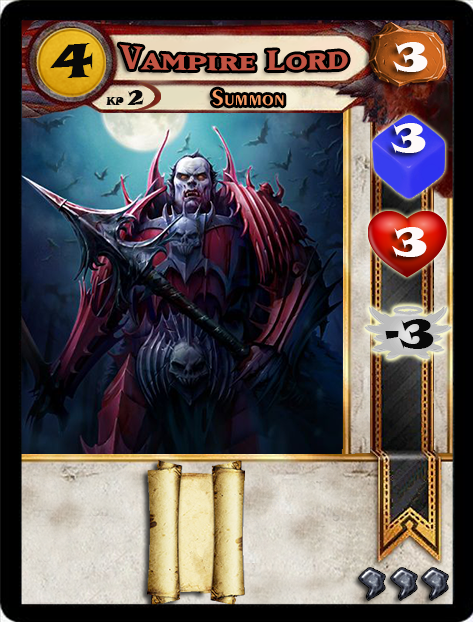
<style>
.page{position:relative;width:473px;height:622px}
.page>*{position:absolute;margin:0}
.t1{font:46.6px "SnapITC-Regular";color:#090909;scale:1.05 1}
.t2{font:40px "SnapITC-Regular";color:#fef9f9;scale:1.05 1}
.t3{font:22.7px "Exotic350BT-DemiBold";color:#f89c64;scale:1.06 1}
.t4{font:20.5px "SnapITC-Regular";color:#090909}
.t5{font:40px "SnapITC-Regular";color:#090909;scale:1.05 1}
</style>
<div class="page">
<p class="t1" style="left:50px;top:43px;width:43px;height:35px">4</p>
<p class="t2" style="left:393px;top:42px;width:35px;height:30px">3</p>
<p class="t3" style="left:212px;top:89px;width:72px;height:17px">Summon</p>
<p class="t4" style="left:127px;top:90px;width:17px;height:15px">2</p>
<p class="t2" style="left:391px;top:123px;width:35px;height:30px">3</p>
<p class="t2" style="left:392px;top:227px;width:35px;height:30px">3</p>
<p class="t5" style="left:385px;top:319px;width:49px;height:30px">-3</p>
</div>
